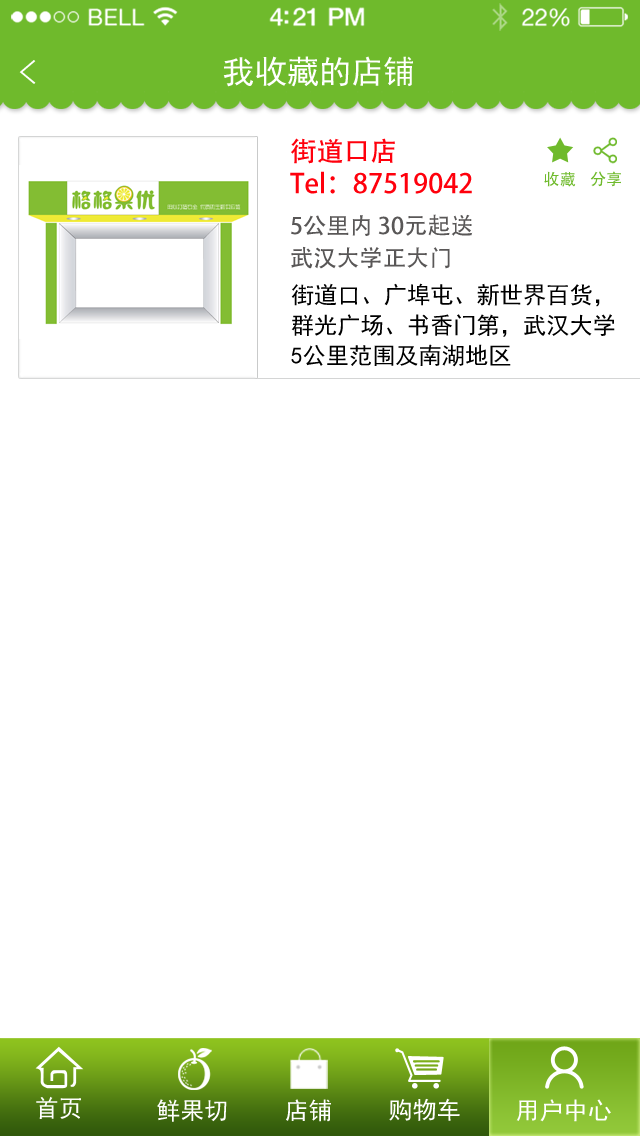
<style>
.page{position:relative;width:640px;height:1136px;background:#ffffff}
.page>*{position:absolute;margin:0}
.t1{font:33.9px "SimHei";color:#ffffff;scale:1.07 1}
.t2{font:32.1px "SimHei";color:#ffffff}
.t3{font:26.8px "AdobeHeitiStd-Regular";color:#ff000c}
.t4{font:16.1px "AdobeHeitiStd-Regular";color:#6fba2c}
.t5{font:23.2px "AdobeHeitiStd-Regular";color:#595757}
.t6{font:23.2px/30.4px "SimHei";color:#000000}
.t7{font:24.1px "SimHei";color:#ffffff}
</style>
<div class="page">
<p class="t1" style="left:19px;top:60px;width:17px;height:24px;rotate:180deg">&gt;</p>
<p class="t2" style="left:223px;top:56px;width:190px;height:31px">我收藏的店铺</p>
<p class="t3" style="left:290px;top:138px;width:182px;height:56px">街道口店  <br>Tel：87519042</p>
<p class="t4" style="left:544px;top:171px;width:32px;height:16px">收藏</p>
<p class="t4" style="left:590px;top:171px;width:31px;height:16px">分享</p>
<p class="t5" style="left:291px;top:214px;width:182px;height:22px">5公里内 30元起送</p>
<p class="t5" style="left:291px;top:246px;width:159px;height:23px">武汉大学正大门</p>
<p class="t6" style="left:291px;top:283px;width:324px;height:84px">街道口、广埠屯、新世界百货，<br>群光广场、书香门第，武汉大学<br>5公里范围及南湖地区</p>
<p class="t7" style="left:36px;top:1096px;width:45px;height:23px">首页</p>
<p class="t7" style="left:157px;top:1099px;width:70px;height:23px">鲜果切</p>
<p class="t7" style="left:286px;top:1099px;width:45px;height:23px">店铺</p>
<p class="t7" style="left:389px;top:1098px;width:71px;height:23px">购物车</p>
<p class="t7" style="left:516px;top:1099px;width:95px;height:23px">用户中心</p>
</div>
